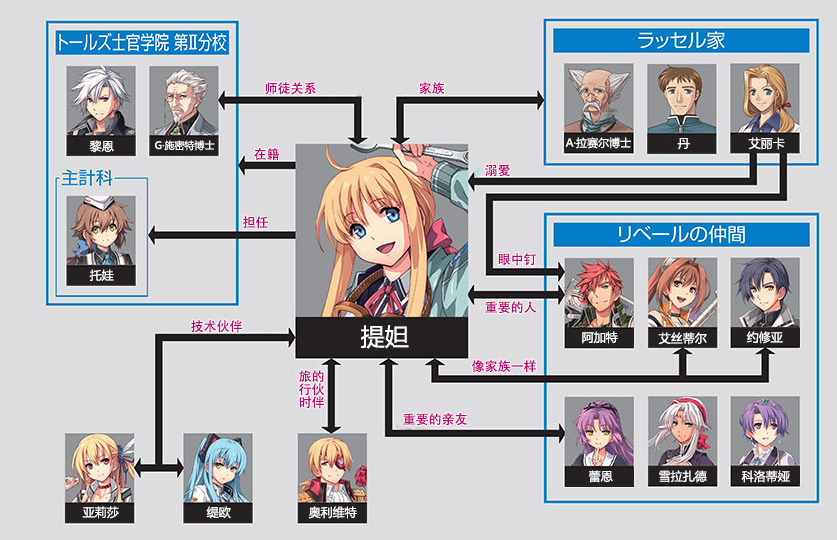
<style>
.page{position:relative;width:837px;height:540px;background:#dddddf}
.page>*{position:absolute;margin:0}
.t1{font:13px "AdobeHeitiStd-Regular";color:#b70773}
.t2{font:11px "MicrosoftYaHei";color:#ffffff}
.t3{font:12px "MicrosoftYaHei";color:#ffffff}
.t4{font:10px "MicrosoftYaHei";color:#ffffff}
.t5{font:24px "MicrosoftYaHei";color:#ffffff}
.t6{font:13px/13px "AdobeHeitiStd-Regular";color:#b70773}
</style>
<div class="page">
<p class="t1" style="left:265px;top:82px;width:51px;height:13px">师徒关系</p>
<p class="t1" style="left:419px;top:82px;width:26px;height:13px">家族</p>
<p class="t2" style="left:565px;top:137px;width:66px;height:12px">A·拉赛尔博士</p>
<p class="t3" style="left:748px;top:137px;width:37px;height:13px">艾丽卡</p>
<p class="t3" style="left:89px;top:140px;width:25px;height:13px">黎恩</p>
<p class="t4" style="left:155px;top:140px;width:60px;height:11px">G·施密特博士</p>
<p class="t1" style="left:254px;top:148px;width:25px;height:13px">在籍</p>
<p class="t3" style="left:677px;top:138px;width:13px;height:12px">丹</p>
<p class="t1" style="left:485px;top:164px;width:25px;height:13px">溺爱</p>
<p class="t1" style="left:243px;top:216px;width:25px;height:13px">担任</p>
<p class="t1" style="left:498px;top:253px;width:39px;height:13px">眼中钉</p>
<p class="t3" style="left:89px;top:269px;width:25px;height:12px">托娃</p>
<p class="t1" style="left:485px;top:301px;width:52px;height:13px">重要的人</p>
<p class="t1" style="left:191px;top:320px;width:51px;height:13px">技术伙伴</p>
<p class="t5" style="left:361px;top:325px;width:48px;height:24px">提妲</p>
<p class="t3" style="left:582px;top:331px;width:36px;height:13px">阿加特</p>
<p class="t3" style="left:658px;top:332px;width:49px;height:13px">艾丝蒂尔</p>
<p class="t3" style="left:746px;top:331px;width:37px;height:13px">约修亚</p>
<p class="t1" style="left:472px;top:360px;width:64px;height:13px">像家族一样</p>
<p class="t6" style="left:299px;top:370px;width:26px;height:39px">旅的<br>行伙<br>时伴</p>
<p class="t1" style="left:403px;top:413px;width:64px;height:13px">重要的亲友</p>
<p class="t3" style="left:589px;top:470px;width:24px;height:13px">蕾恩</p>
<p class="t3" style="left:659px;top:470px;width:48px;height:13px">雪拉扎德</p>
<p class="t3" style="left:741px;top:470px;width:49px;height:13px">科洛蒂娅</p>
<p class="t3" style="left:82px;top:506px;width:37px;height:13px">亚莉莎</p>
<p class="t3" style="left:206px;top:506px;width:25px;height:13px">缇欧</p>
<p class="t3" style="left:308px;top:506px;width:49px;height:13px">奥利维特</p>
</div>
